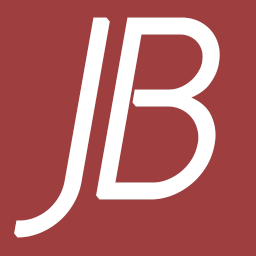
<style>
.page{position:relative;width:256px;height:256px;background:#9e3e3e}
.page>*{position:absolute;margin:0}
.t1{font:250px "Capsuula";letter-spacing:-0.075em;color:#ffffff;font-weight:bold;font-style:italic}
</style>
<div class="page">
<p class="t1" style="left:14px;top:17px;width:206px;height:221px">JB</p>
</div>
